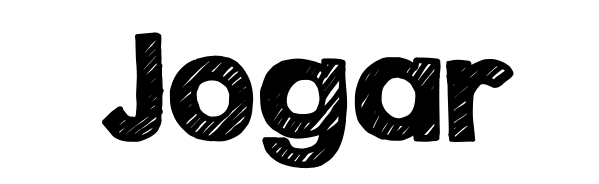
<style>
.page{position:relative;width:599px;height:184px;background:#ffffff}
.page>*{position:absolute;margin:0}
.t1{font:125px "KGSecondChancesSketch";color:#000000;font-weight:bold}
</style>
<div class="page">
<p class="t1" style="left:102px;top:32px;width:412px;height:137px">Jogar</p>
</div>
